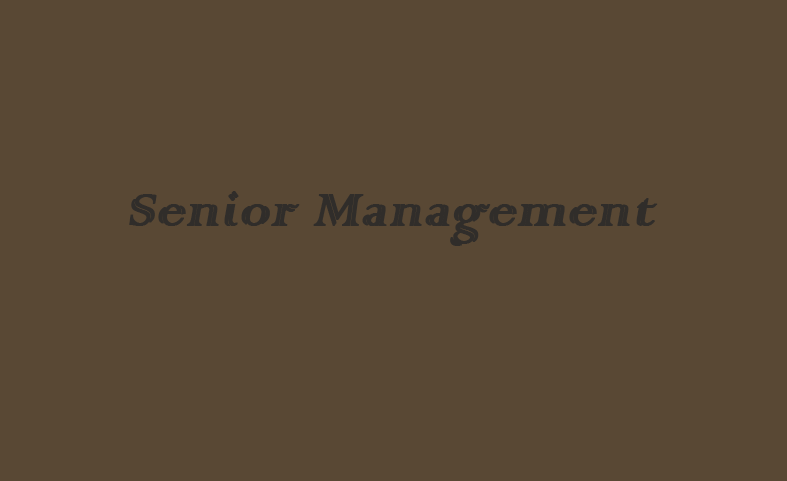
<style>
.page{position:relative;width:787px;height:481px;background:#594834}
.page>*{position:absolute;margin:0}
.t1{font:59.7px "ColonnaMT";letter-spacing:0.005em;color:#302d2a;font-weight:bold;font-style:italic}
</style>
<div class="page">
<p class="t1" style="left:129px;top:191px;width:529px;height:55px">Senior Management</p>
</div>
